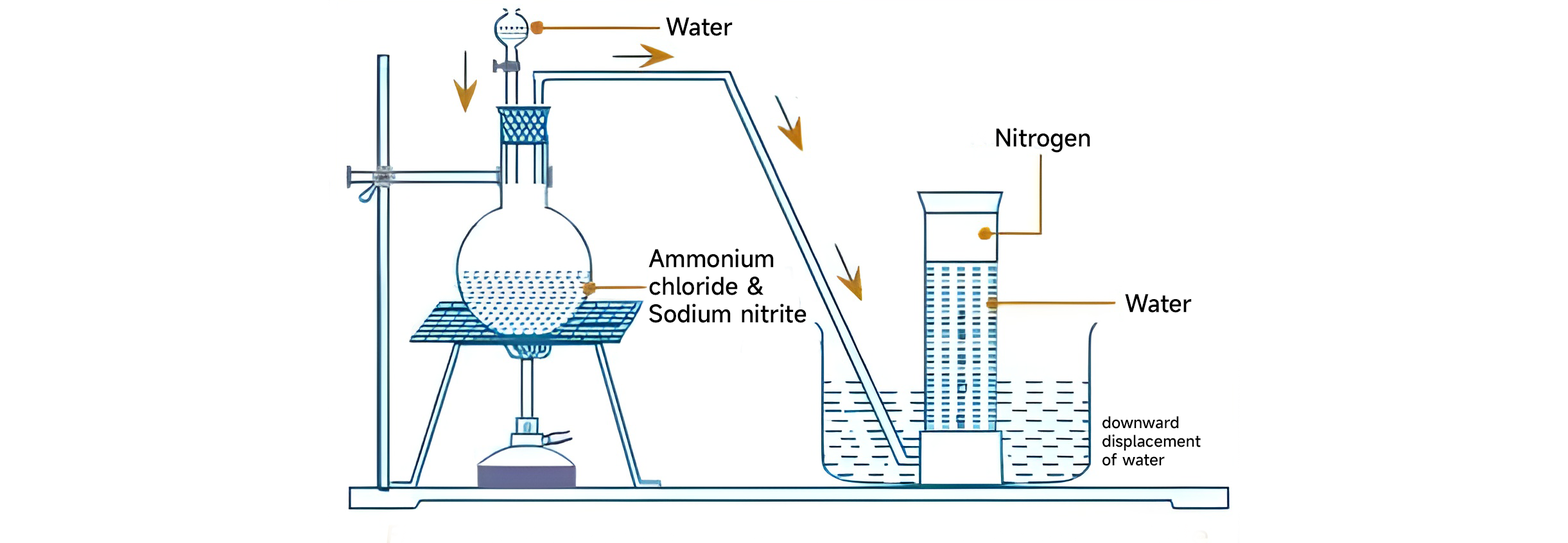
<style>
.page{position:relative;width:1568px;height:543px;background:#ffffff}
.page>*{position:absolute;margin:0}
.t1{font:23.1px "MiSans-Medium";color:#000000}
.t2{font:15.4px "MiSans-Medium";color:#000000}
</style>
<div class="page">
<p class="t1" style="left:666px;top:17px;width:67px;height:19px">Water</p>
<p class="t1" style="left:996px;top:128px;width:94px;height:25px">Nitrogen</p>
<p class="t1" style="left:649px;top:248px;width:157px;height:75px">Ammonium <br>chloride &amp;<br>Sodium nitrite</p>
<p class="t1" style="left:1125px;top:294px;width:67px;height:19px">Water</p>
<p class="t2" style="left:1102px;top:416px;width:99px;height:50px">downward<br>displacement<br>of water</p>
</div>
